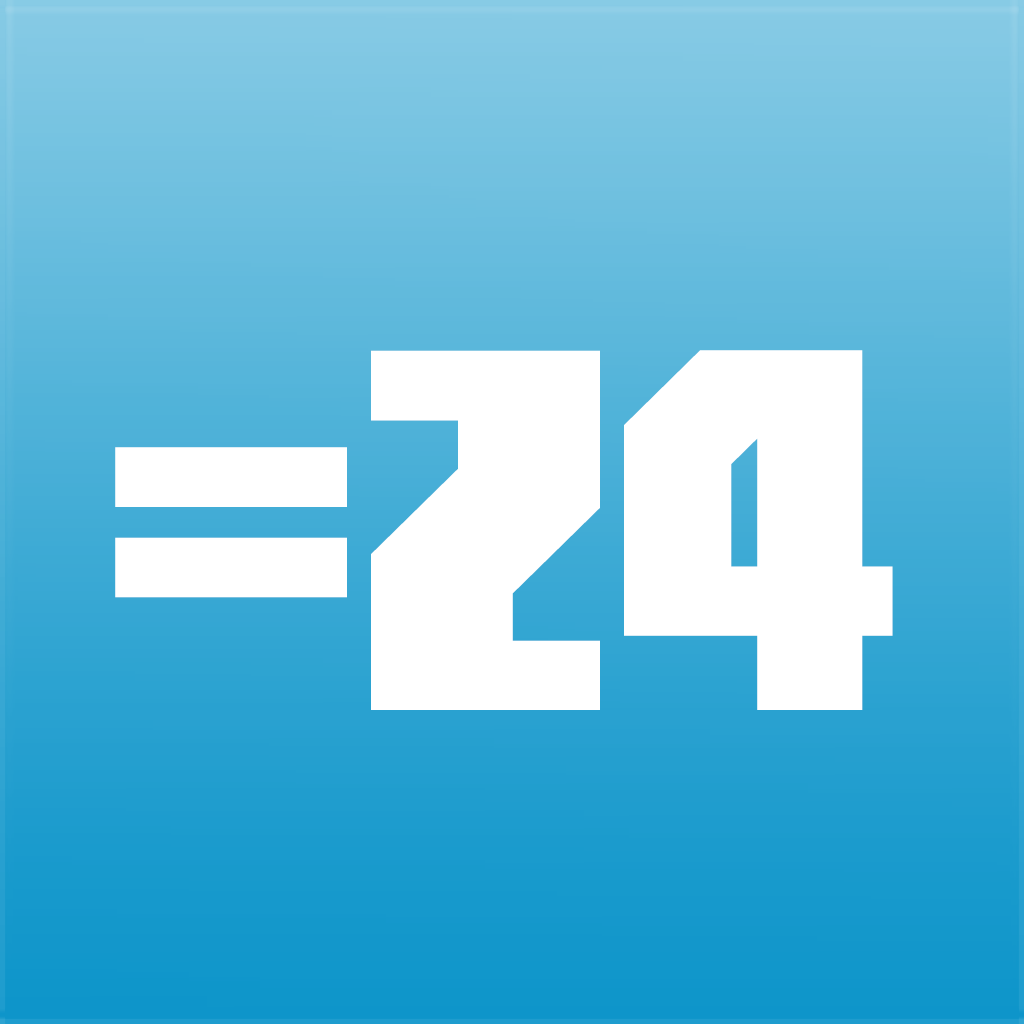
<style>
.page{position:relative;width:1024px;height:1024px}
.page>*{position:absolute;margin:0}
.t1{font:403.8px "MFJinHei_Noncommercial-Regular";color:#ffffff}
</style>
<div class="page">
<p class="t1" style="left:115px;top:350px;width:778px;height:360px">=24</p>
</div>
